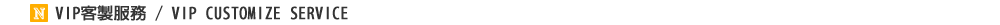
<style>
.page{position:relative;width:1000px;height:25px;background:#ffffff}
.page>*{position:absolute;margin:0}
.t1{font:16px "AdobeFanHeitiStd-Bold";color:#343434;font-weight:bold}
.t2{font:16px "ChrluenEG-Medium-GB";color:#ffffff;font-weight:bold}
</style>
<div class="page">
<p class="t1" style="left:55px;top:5px;width:293px;height:16px">VIP客製服務 / VIP CUSTOMIZE SERVICE</p>
<p class="t2" style="left:33px;top:7px;width:12px;height:13px">N</p>
</div>
